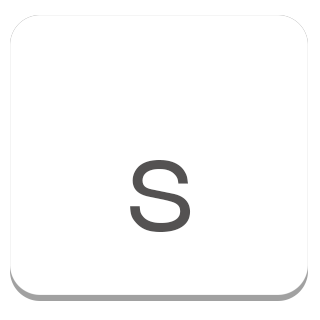
<style>
.page{position:relative;width:320px;height:320px;background:#ffffff}
.page>*{position:absolute;margin:0}
.t1{font:100px "NimbusSanL-ReguCond";color:#545252;scale:1.28 1}
</style>
<div class="page">
<p class="t1" style="left:130px;top:160px;width:61px;height:72px">S</p>
</div>
